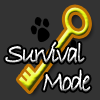
<style>
.page{position:relative;width:100px;height:100px;background:#333333}
.page>*{position:absolute;margin:0}
.t1{font:29.4px "BradleyHandITC";letter-spacing:-0.1em;font-weight:bold;scale:0.83 1}
.t2{font:29.4px "BradleyHandITC";letter-spacing:-0.1em;color:#ffffff;font-weight:bold;scale:0.83 1}
</style>
<div class="page">
<p class="t1" style="left:5px;top:41px;width:80px;height:22px">Survival</p>
<p class="t2" style="left:43px;top:69px;width:48px;height:23px">Mode</p>
</div>
